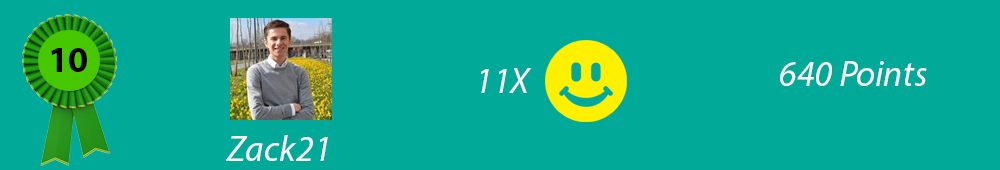
<style>
.page{position:relative;width:1000px;height:170px;background:#00a998}
.page>*{position:absolute;margin:0}
.t1{font:36px "MyriadPro-Bold";color:#000000}
.t2{font:36px "MyriadPro-It";color:#ffffff}
</style>
<div class="page">
<p class="t1" style="left:51px;top:48px;width:36px;height:24px">10</p>
<p class="t2" style="left:780px;top:61px;width:147px;height:25px">640 Points</p>
<p class="t2" style="left:481px;top:68px;width:51px;height:25px">11X</p>
<p class="t2" style="left:226px;top:135px;width:102px;height:26px">Zack21</p>
</div>
